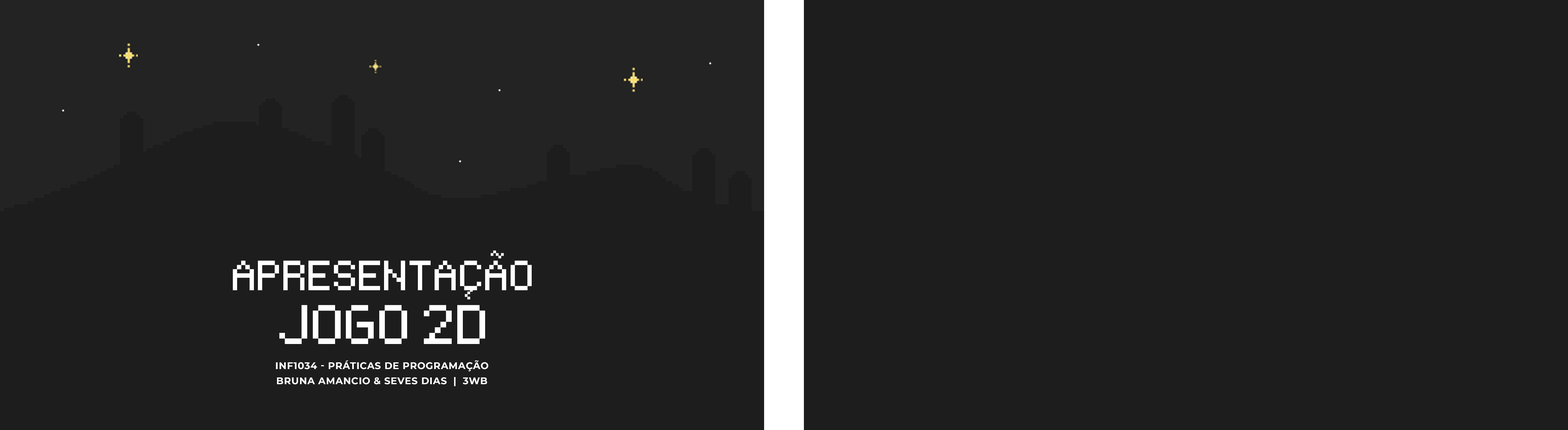
<style>
.page{position:relative;width:1568px;height:430px;background:#1d1d1d}
.page>*{position:absolute;margin:0}
.t1{font:41.7px "Pixeltype";color:#ffffff;text-transform:uppercase}
.t2{font:67.3px "Pixeltype";color:#ffffff;text-transform:uppercase}
.t3{font:88.9px "Pixeltype";color:#ffffff;text-transform:uppercase}
.t4{font:9.6px "Montserrat-Bold";letter-spacing:0.04em;color:#ffffff;text-transform:uppercase}
</style>
<div class="page">
<p class="t1" style="left:491px;top:250px;width:13px;height:8px">~</p>
<p class="t2" style="left:233px;top:260px;width:299px;height:30px">APRESENTACAO</p>
<p class="t1" style="left:465px;top:286px;width:8px;height:13px;rotate:-90deg">~</p>
<p class="t3" style="left:279px;top:305px;width:206px;height:39px">JOGO 2D</p>
<p class="t4" style="left:276px;top:360px;width:212px;height:11px">INF1034 - PRÁTICAS DE PROGRAMAÇÃO</p>
<p class="t4" style="left:277px;top:377px;width:210px;height:9px">bruna amancio &amp; seves dias  |  3WB</p>
</div>
